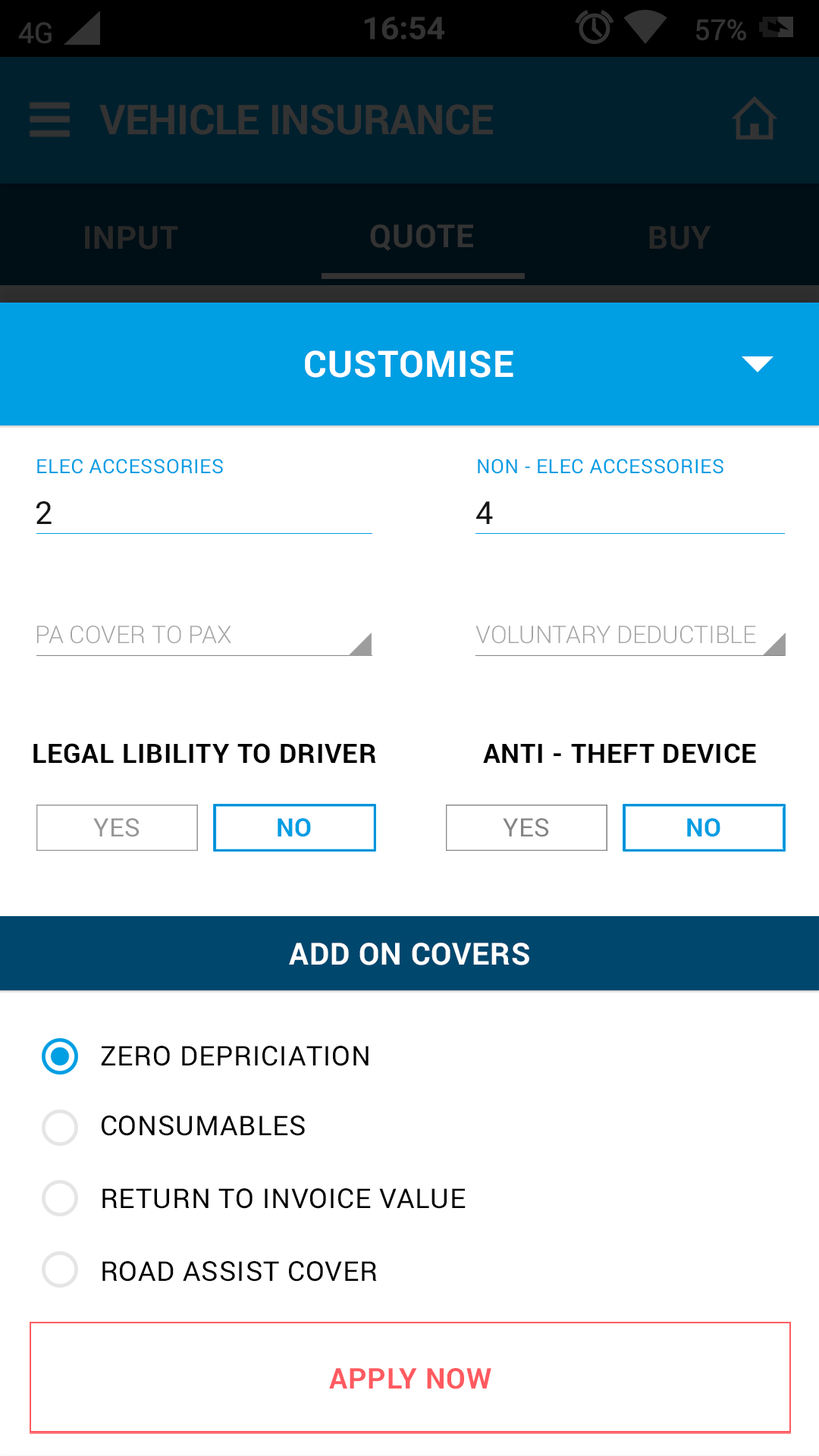
<style>
.page{position:relative;width:819px;height:1456px;background:#ffffff}
.page>*{position:absolute;margin:0}
.t1{font:36.4px "Roboto-Bold";letter-spacing:0.025em;color:#ffffff;text-transform:uppercase}
.t2{font:19.7px "Roboto-Regular";letter-spacing:0.025em;color:#009ee3}
.t3{font:31.6px "Roboto-Regular";letter-spacing:0.025em;color:#161616;text-transform:uppercase}
.t4{font:24.3px "Roboto-Light";color:#a5a5a5}
.t5{font:26.6px "Roboto-Bold";letter-spacing:0.025em;color:#000000}
.t6{font:25.2px "Roboto-Regular";letter-spacing:0.025em;color:#969696}
.t7{font:25.2px "Roboto-Bold";letter-spacing:0.025em;color:#009ee3}
.t8{font:25.2px "Roboto-Regular";letter-spacing:0.025em;color:#848484}
.t9{font:30.3px "Roboto-Bold";letter-spacing:0.025em;color:#ffffff;text-transform:uppercase}
.t10{font:27.3px "Roboto-Regular";letter-spacing:0.025em;color:#000000}
.t11{font:28.4px "Roboto-Bold";letter-spacing:0.025em;color:#ff5a60;text-transform:uppercase}
</style>
<div class="page">
<p class="t1" style="left:305px;top:350px;width:208px;height:28px">CUSTOMISE</p>
<p class="t2" style="left:37px;top:459px;width:186px;height:15px">ELEC ACCESSORIES</p>
<p class="t2" style="left:478px;top:459px;width:245px;height:15px">NON - ELEC ACCESSORIES</p>
<p class="t3" style="left:36px;top:501px;width:16px;height:23px">2</p>
<p class="t3" style="left:476px;top:501px;width:17px;height:23px">4</p>
<p class="t4" style="left:37px;top:626px;width:194px;height:18px">PA COVER TO PAX</p>
<p class="t4" style="left:475px;top:626px;width:281px;height:18px">VOLUNTARY DEDUCTIBLE</p>
<p class="t5" style="left:33px;top:743px;width:343px;height:21px">LEGAL LIBILITY TO DRIVER</p>
<p class="t5" style="left:483px;top:743px;width:273px;height:21px">ANTI - THEFT DEVICE</p>
<p class="t6" style="left:93px;top:818px;width:47px;height:19px">YES</p>
<p class="t7" style="left:278px;top:818px;width:33px;height:19px">NO</p>
<p class="t8" style="left:503px;top:818px;width:46px;height:19px">YES</p>
<p class="t7" style="left:687px;top:818px;width:33px;height:19px">NO</p>
<p class="t9" style="left:289px;top:943px;width:240px;height:22px">ADD ON COVERS</p>
<p class="t10" style="left:101px;top:1046px;width:268px;height:20px">ZERO DEPRICIATION</p>
<p class="t10" style="left:102px;top:1115px;width:203px;height:21px">CONSUMABLES</p>
<p class="t10" style="left:102px;top:1188px;width:364px;height:21px">RETURN TO INVOICE VALUE</p>
<p class="t10" style="left:102px;top:1261px;width:275px;height:21px">ROAD ASSIST COVER</p>
<p class="t11" style="left:329px;top:1368px;width:162px;height:21px">APPLY NOW</p>
</div>
